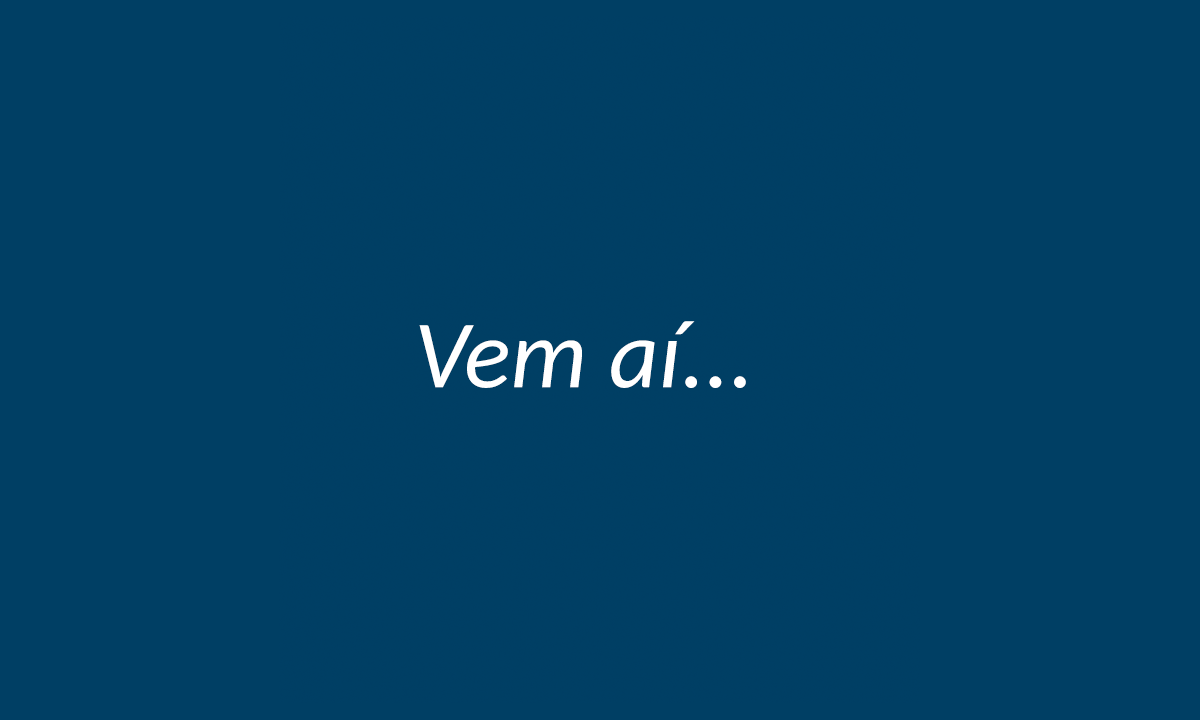
<style>
.page{position:relative;width:1200px;height:720px;background:#003f64}
.page>*{position:absolute;margin:0}
.t1{font:96.8px "Carlito-Italic";color:#ffffff}
</style>
<div class="page">
<p class="t1" style="left:419px;top:321px;width:327px;height:67px">Vem aí...</p>
</div>
